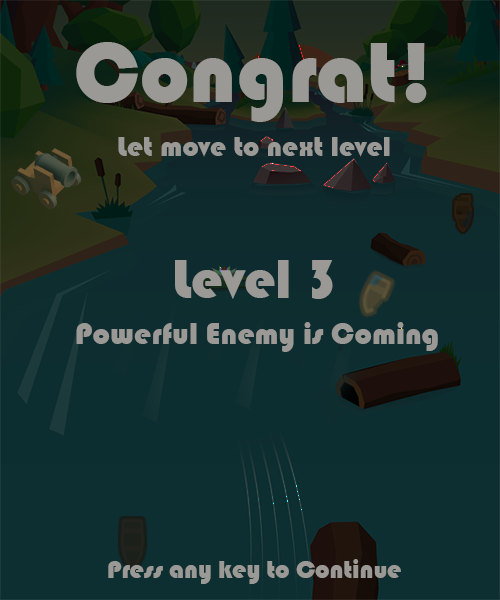
<style>
.page{position:relative;width:500px;height:600px}
.page>*{position:absolute;margin:0}
.t1{font:88.2px "Bauhaus93";color:#9a9995}
.t2{font:29.1px "Bauhaus93";color:#9a9995}
.t3{font:56.7px "Bauhaus93";color:#9a9995}
.t4{font:31.1px "Bauhaus93";color:#9a9995}
.t5{font:25.7px "Bauhaus93";color:#9a9995}
</style>
<div class="page">
<p class="t1" style="left:76px;top:42px;width:351px;height:80px">Congrat!</p>
<p class="t2" style="left:118px;top:137px;width:272px;height:20px">Let move to next level</p>
<p class="t3" style="left:175px;top:260px;width:158px;height:39px">Level 3</p>
<p class="t4" style="left:76px;top:322px;width:362px;height:30px">Powerful Enemy is Coming</p>
<p class="t5" style="left:108px;top:559px;width:293px;height:25px">Press any key to Continue</p>
</div>
